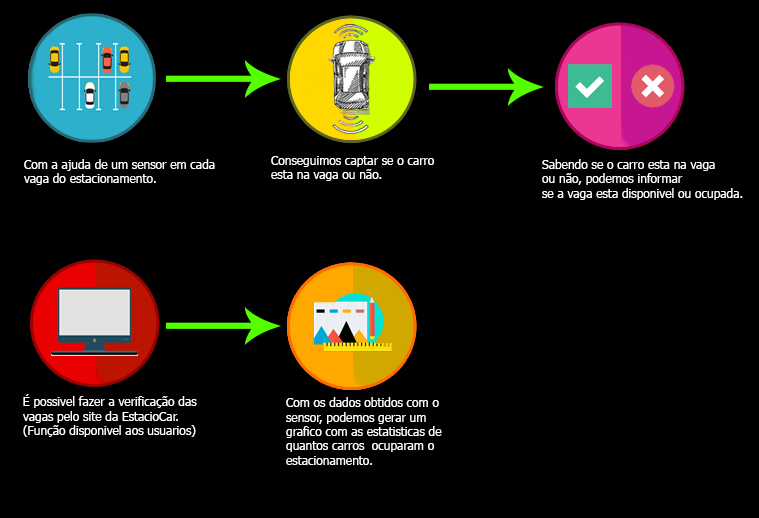
<style>
.page{position:relative;width:759px;height:518px;background:#000000}
.page>*{position:absolute;margin:0}
.t1{font:12px "Tahoma";color:#ffffff}
</style>
<div class="page">
<p class="t1" style="left:24px;top:159px;width:191px;height:26px">Com a ajuda de um sensor em cada <br>vaga do estacionamento.</p>
<p class="t1" style="left:271px;top:156px;width:163px;height:25px">Conseguimos captar se o carro<br>esta na vaga ou não.</p>
<p class="t1" style="left:542px;top:159px;width:201px;height:41px">Sabendo se o carro esta na vaga<br>ou não, podemos informar <br>se a vaga esta disponivel ou ocupada.</p>
<p class="t1" style="left:23px;top:394px;width:174px;height:43px">É possivel fazer a verificação das vagas pelo site da EstacioCar.                               (Função disponivel aos usuarios)</p>
<p class="t1" style="left:286px;top:397px;width:156px;height:68px">Com os dados obtidos com o sensor, podemos gerar um grafico com as estatisticas de quantos carros  ocuparam o estacionamento.</p>
</div>
